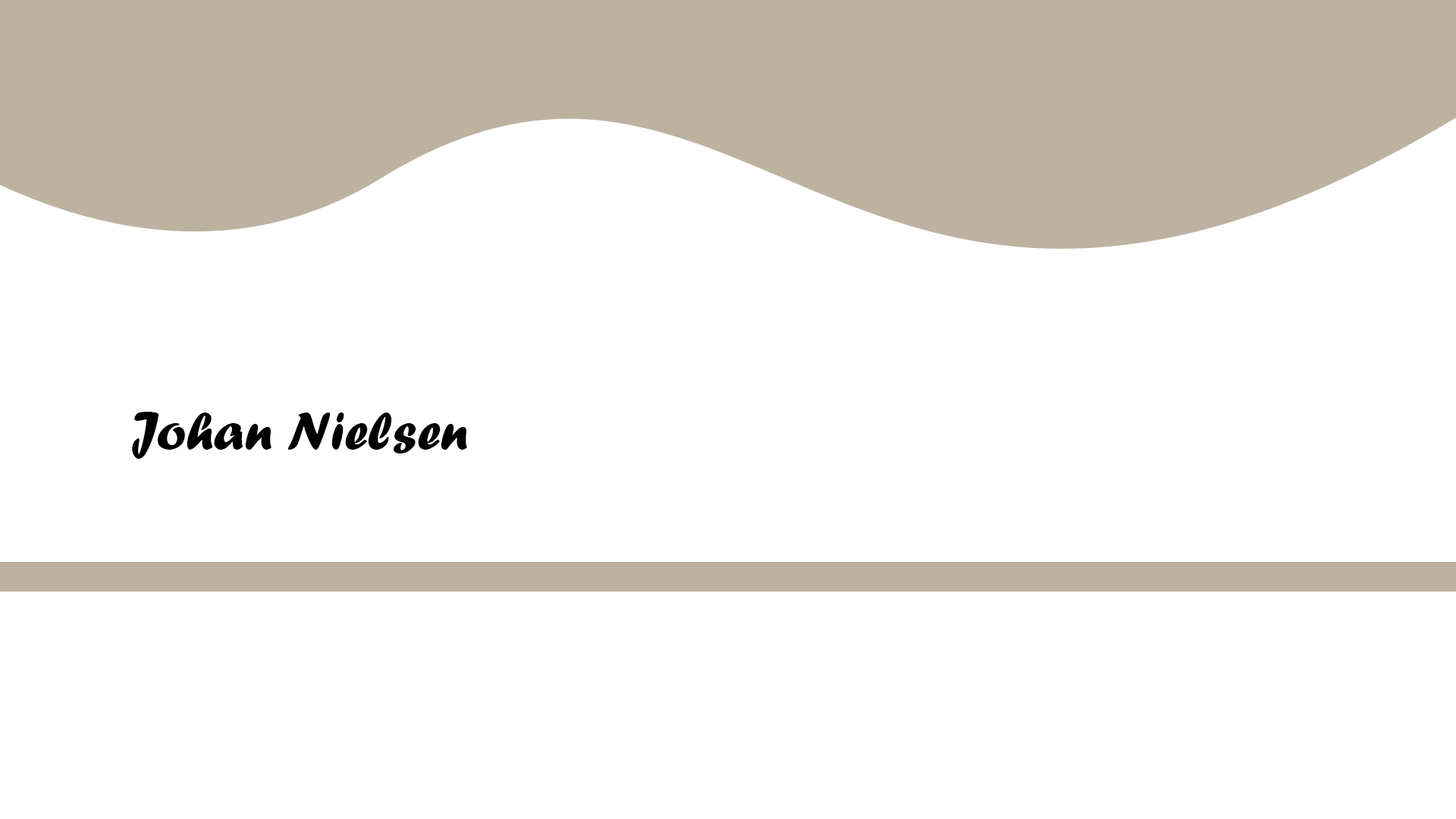
<style>
.page{position:relative;width:1456px;height:819px;background:#ffffff}
.page>*{position:absolute;margin:0}
.t1{font:54.6px "ForteMT";color:#000000}
</style>
<div class="page">
<p class="t1" style="left:132px;top:412px;width:335px;height:47px">Johan Nielsen</p>
</div>
